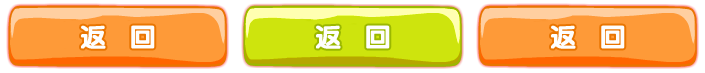
<style>
.page{position:relative;width:705px;height:73px;background:#fe9a38}
.page>*{position:absolute;margin:0}
.t1{font:26px "JCuYuan";letter-spacing:0.3em;color:#fefefe;font-weight:bold}
</style>
<div class="page">
<p class="t1" style="left:81px;top:25px;width:74px;height:24px">返 回</p>
<p class="t1" style="left:316px;top:25px;width:74px;height:24px">返 回</p>
<p class="t1" style="left:551px;top:25px;width:74px;height:24px">返 回</p>
</div>
